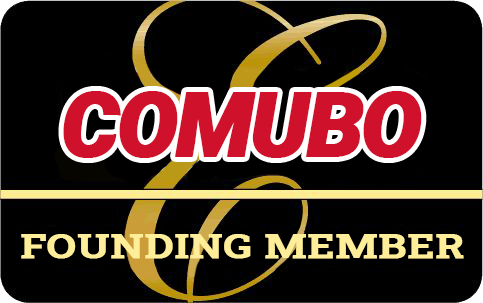
<style>
.page{position:relative;width:483px;height:303px;background:#000000}
.page>*{position:absolute;margin:0}
.t1{font:90px "Roboto-BlackItalic";letter-spacing:-0.05em;color:#cf112b;font-weight:bold}
.t2{font:33.6px "RobotoSlab-SemiBold";color:#ffee99;font-weight:bold;scale:1.25 1}
</style>
<div class="page">
<p class="t1" style="left:63px;top:91px;width:359px;height:67px">COMUBO</p>
<p class="t2" style="left:21px;top:234px;width:443px;height:25px">FOUNDING MEMBER</p>
</div>
